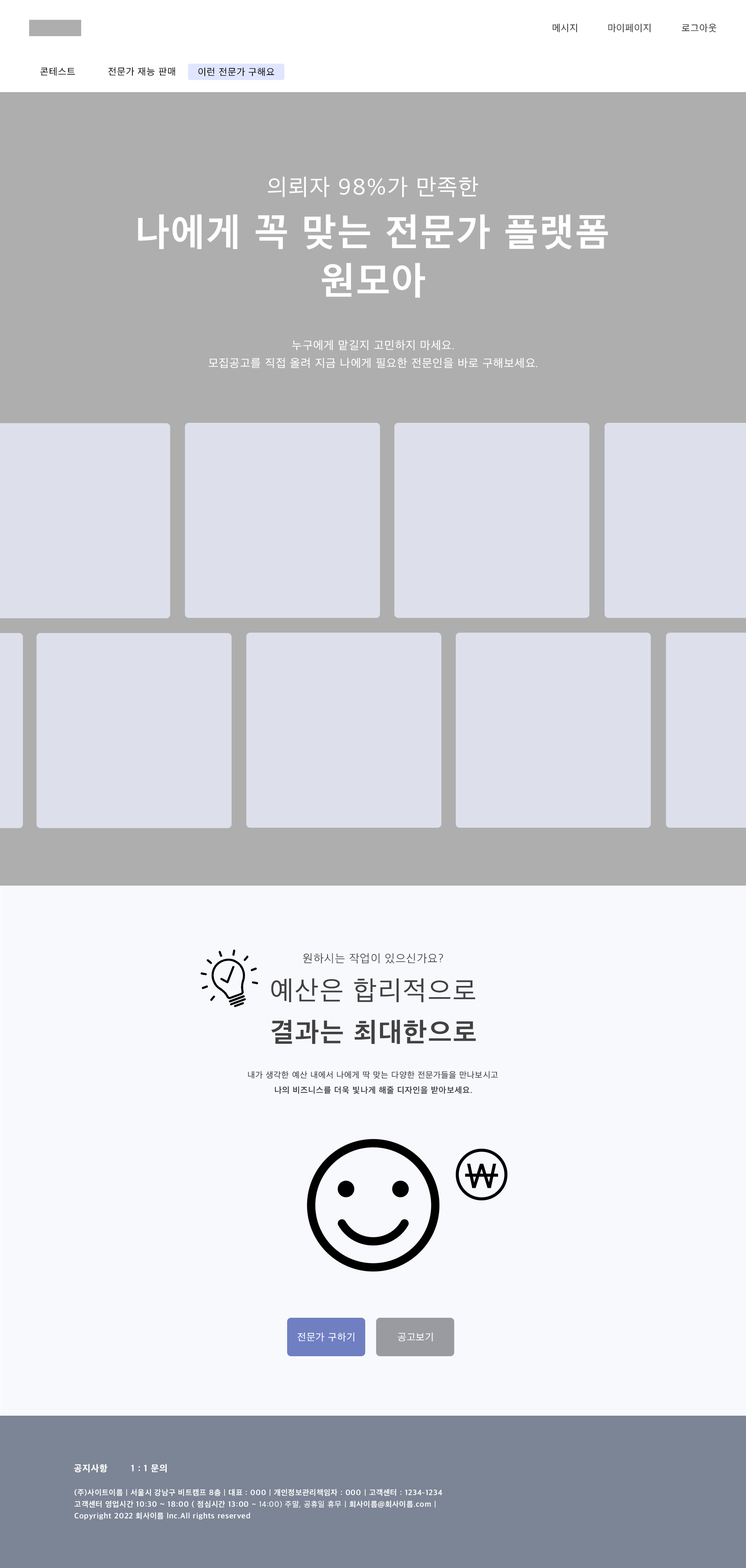
<style>
.page{position:relative;width:746px;height:1568px;background:#f8f9fd}
.page>*{position:absolute;margin:0}
.t1{font:9.7px "AppleSDGothicNeo-Regular";letter-spacing:0.05em;color:#333333}
.t2{font:9.7px "AppleSDGothicNeo-Regular";letter-spacing:0.05em;color:#000000}
.t3{font:23.3px "AppleSDGothicNeo-Regular";letter-spacing:0.05em;color:#ffffff}
.t4{font:38.9px "AppleSDGothicNeo-Bold";letter-spacing:0.05em;color:#ffffff}
.t5{font:11.7px "AppleSDGothicNeo-Regular";letter-spacing:0.05em;color:#ffffff}
.t6{font:11.7px "AppleSDGothicNeo-Light";letter-spacing:0.05em;color:#414141}
.t7{font:27.2px "AppleSDGothicNeo-Regular";letter-spacing:0.05em;color:#414141}
.t8{font:27.2px "AppleSDGothicNeo-Bold";letter-spacing:0.05em;color:#414141}
.t9{font:8.5px "AppleSDGothicNeo-Regular";letter-spacing:0.05em;color:#414141}
.t10{font:8.5px "AppleSDGothicNeo-Bold";letter-spacing:0.05em;color:#414141}
.t11{font:10.1px "AppleSDGothicNeo-Regular";letter-spacing:0.05em;color:#ffffff}
.t12{font:9.3px "AppleSDGothicNeo-ExtraBold";letter-spacing:0.05em;color:#ffffff}
.t13{font:7.8px/11.7px "AppleSDGothicNeo-Bold";letter-spacing:0.05em;color:#ffffff}
.t14{font:7.8px/11.7px "AppleSDGothicNeo-Regular";letter-spacing:0.05em;color:#ffffff}
</style>
<div class="page">
<p class="t1" style="left:553px;top:24px;width:24px;height:8px">메시지</p>
<p class="t1" style="left:608px;top:24px;width:43px;height:8px">마이페이지</p>
<p class="t1" style="left:682px;top:24px;width:35px;height:8px">로그아웃</p>
<p class="t2" style="left:40px;top:67px;width:35px;height:9px">콘테스트</p>
<p class="t2" style="left:108px;top:67px;width:67px;height:9px">전문가 재능 판매</p>
<p class="t2" style="left:198px;top:68px;width:76px;height:8px">이런 전문가 구해요</p>
<p class="t3" style="left:268px;top:176px;width:210px;height:21px">의뢰자 98%가 만족한</p>
<p class="t4" style="left:138px;top:214px;width:470px;height:35px">나에게 꼭 맞는 전문가 플랫폼</p>
<p class="t4" style="left:321px;top:263px;width:104px;height:35px">원모아</p>
<p class="t5" style="left:292px;top:340px;width:162px;height:11px">누구에게 맡길지 고민하지 마세요.</p>
<p class="t5" style="left:209px;top:358px;width:328px;height:10px">모집공고를 직접 올려 지금 나에게 필요한 전문인을 바로 구해보세요.</p>
<p class="t6" style="left:303px;top:953px;width:140px;height:11px">원하시는 작업이 있으신가요?</p>
<p class="t7" style="left:271px;top:978px;width:204px;height:24px">예산은 합리적으로</p>
<p class="t8" style="left:271px;top:1020px;width:205px;height:24px">결과는 최대한으로</p>
<p class="t9" style="left:248px;top:1071px;width:250px;height:8px">내가 생각한 예산 내에서 나에게 딱 맞는 다양한 전문가들을 만나보시고</p>
<p class="t10" style="left:275px;top:1086px;width:197px;height:8px">나의 비즈니스를 더욱 빛나게 해줄 디자인을 받아보세요.</p>
<p class="t11" style="left:298px;top:1333px;width:56px;height:8px">전문가 구하기</p>
<p class="t11" style="left:398px;top:1333px;width:35px;height:8px">공고보기</p>
<p class="t12" style="left:74px;top:1464px;width:34px;height:8px">공지사항</p>
<p class="t12" style="left:131px;top:1464px;width:36px;height:8px">1 : 1 문의</p>
<p class="t13" style="left:74px;top:1489px;width:368px;height:31px">(주)사이트이름 | 서울시 강남구 비트캠프 8층 | 대표 : 000 | 개인정보관리책임자 : 000 | 고객센터 : 1234-1234<br>고객센터 영업시간 10:30 ~ 18:00 ( 점심시간 13:00<span class="t14"> ~ 14:00) 주말, 공휴일 휴무</span> | 회사이름@회사이름.com | <br>Copyright 2022 회사이름 lnc.All rights reserved</p>
</div>
